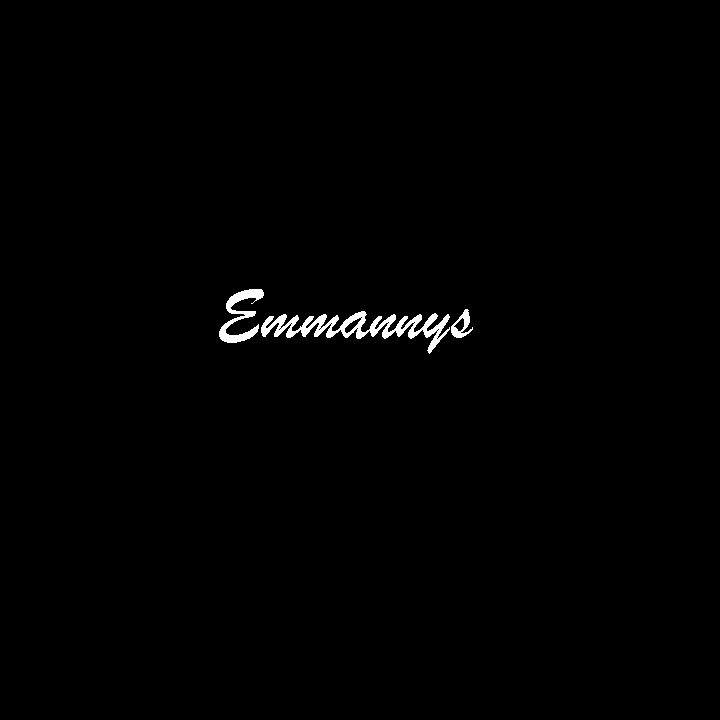
<style>
.page{position:relative;width:720px;height:720px;background:#000000}
.page>*{position:absolute;margin:0}
.t1{font:72px "BrushScriptMT";color:#ffffff}
</style>
<div class="page">
<p class="t1" style="left:219px;top:289px;width:254px;height:65px">Emmannys</p>
</div>
